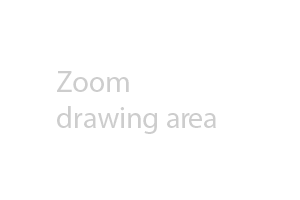
<style>
.page{position:relative;width:300px;height:200px;background:#ffffff}
.page>*{position:absolute;margin:0}
.t1{font:30px "MyriadPro-Regular";color:#cdcdcd}
</style>
<div class="page">
<p class="t1" style="left:57px;top:71px;width:159px;height:63px">Zoom <br>drawing area</p>
</div>
